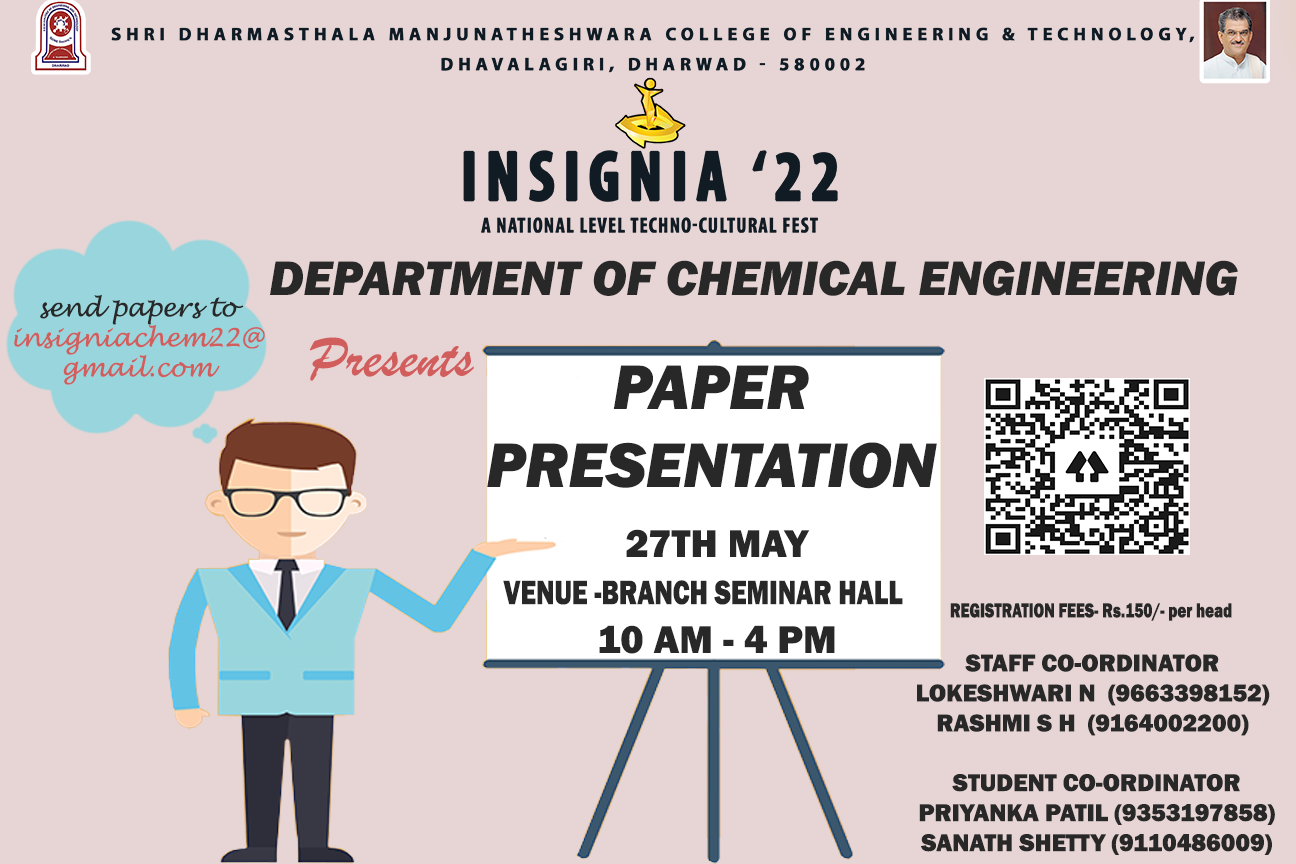
<style>
.page{position:relative;width:1296px;height:864px;background:#e6d5d4}
.page>*{position:absolute;margin:0}
.t1{font:50px "FranklinGothic-HeavyItalic";color:#282828}
.t2{font:25px "LucidaHandwriting-Italic";color:#d25d5d}
.t3{font:25px "LucidaHandwriting-Italic";color:#282828}
.t4{font:60px "BrushScriptMT";color:#d25d5d}
.t5{font:65px "FranklinGothic-HeavyItalic";color:#282828}
.t6{font:40px "FranklinGothic-Heavy";color:#282828}
.t7{font:34.9px "FranklinGothic-Heavy";color:#282828;scale:0.77 1}
.t8{font:20.8px "FranklinGothic-Heavy";color:#282828;scale:0.74 1}
.t9{font:25px "FranklinGothic-Heavy";color:#282828}
</style>
<div class="page">
<p class="t1" style="left:270px;top:260px;width:968px;height:36px">DEPARTMENT OF CHEMICAL ENGINEERING</p>
<p class="t2" style="left:14px;top:294px;width:251px;height:91px;text-align:center"><span class="t3">send papers to<br></span>insigniachem22@gmail.com</p>
<p class="t4" style="left:309px;top:337px;width:165px;height:44px">Presents</p>
<p class="t5" style="left:487px;top:365px;width:450px;height:124px;text-align:center">PAPER <br>PRESENTATION</p>
<p class="t6" style="left:599px;top:529px;width:236px;height:125px;text-align:center">27TH MAY<br><br>10 AM - 4 PM</p>
<p class="t7" style="left:503px;top:580px;width:400px;height:25px">VENUE -BRANCH SEMINAR HALL</p>
<p class="t8" style="left:950px;top:603px;width:282px;height:18px">REGISTRATION FEES- Rs.150/- per head</p>
<p class="t9" style="left:917px;top:654px;width:353px;height:82px;text-align:center">STAFF CO-ORDINATOR<br>LOKESHWARI N  (9663398152)<br>RASHMI S H  (9164002200)</p>
<p class="t9" style="left:919px;top:774px;width:356px;height:81px;text-align:center">STUDENT CO-ORDINATOR<br>PRIYANKA PATIL (9353197858)<br>SANATH SHETTY (9110486009)</p>
</div>
